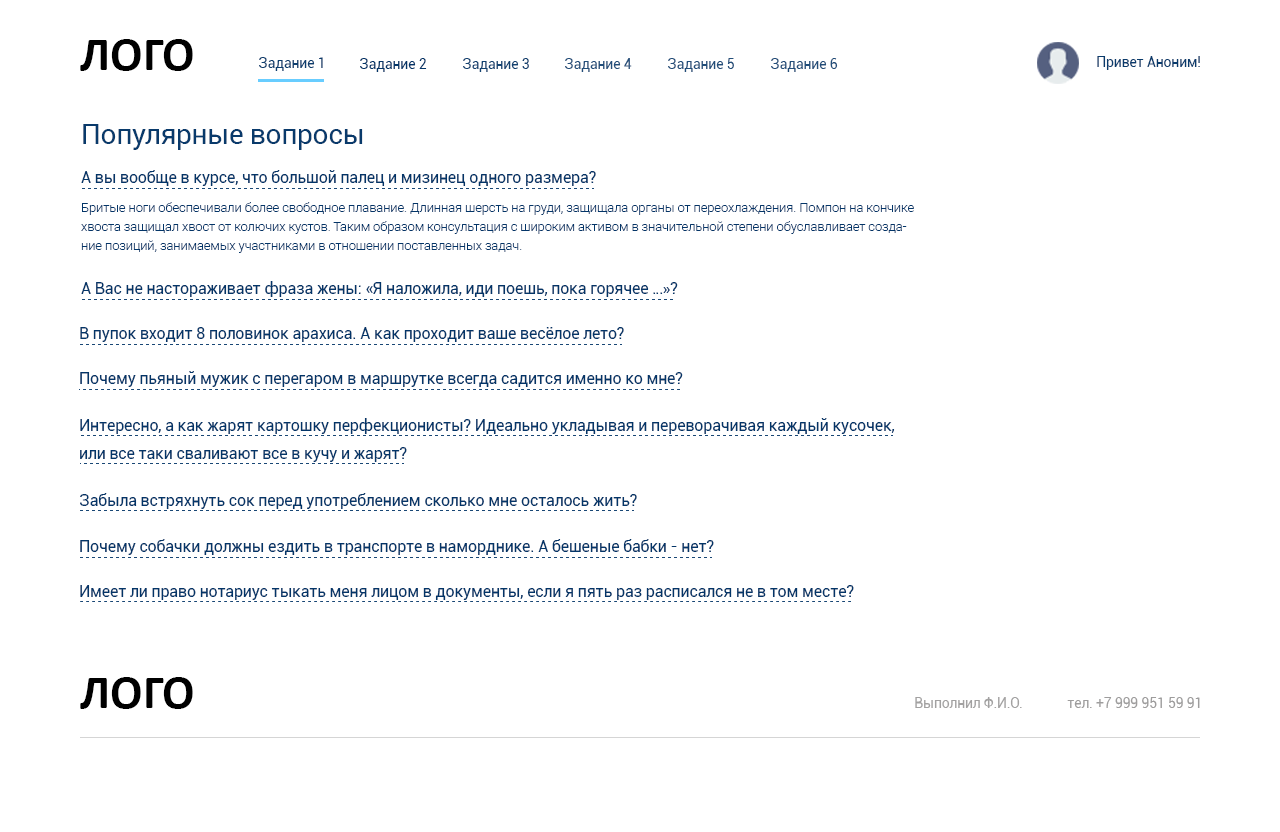
<style>
.page{position:relative;width:1280px;height:832px;background:#ffffff}
.page>*{position:absolute;margin:0}
.t1{font:48px "Calibri-Bold";color:#000000}
.t2{font:14px "Roboto-Regular";letter-spacing:-0.01em;color:#0d3e6e}
.t3{font:14px "Roboto-Regular";letter-spacing:-0.01em;color:#033568}
.t4{font:14px "Roboto-Regular";letter-spacing:-0.01em;color:#124271}
.t5{font:14px "Roboto-Regular";letter-spacing:-0.01em;color:#224e7a}
.t6{font:14px "Roboto-Regular";letter-spacing:-0.01em;color:#0a3b6c}
.t7{font:28px "Roboto-Regular";letter-spacing:-0.01em;color:#093a6b}
.t8{font:16px "Roboto-Regular";letter-spacing:-0.01em;color:#033568}
.t9{font:13px/19px "Roboto-Light";letter-spacing:-0.01em;color:#033568}
.t10{font:16px/28px "Roboto-Regular";letter-spacing:-0.01em;color:#033568}
.t11{font:14px "Roboto-Regular";letter-spacing:-0.01em;color:#a2a1a1}
.t12{font:14px "Roboto-Regular";letter-spacing:-0.01em;color:#9e9d9d}
</style>
<div class="page">
<p class="t1" style="left:80px;top:39px;width:113px;height:32px">ЛОГО</p>
<p class="t2" style="left:259px;top:57px;width:64px;height:14px">Задание 1</p>
<p class="t3" style="left:360px;top:58px;width:67px;height:14px">Задание 2</p>
<p class="t4" style="left:463px;top:58px;width:66px;height:14px">Задание 3</p>
<p class="t5" style="left:565px;top:58px;width:67px;height:14px">Задание 4</p>
<p class="t5" style="left:668px;top:58px;width:66px;height:14px">Задание 5</p>
<p class="t5" style="left:771px;top:58px;width:67px;height:14px">Задание 6</p>
<p class="t6" style="left:1097px;top:56px;width:103px;height:14px">Привет Аноним!</p>
<p class="t7" style="left:83px;top:124px;width:280px;height:26px">Популярные вопросы</p>
<p class="t8" style="left:81px;top:170px;width:515px;height:16px">А вы вообще в курсе, что большой палец и мизинец одного размера?</p>
<p class="t9" style="left:81px;top:202px;width:833px;height:51px">Бритые ноги обеспечивали более свободное плавание. Длинная шерсть на груди, защищала органы от переохлаждения. Помпон на кончике хвоста защищал хвост от колючих кустов. Таким образом консультация с широким активом в значительной степени обуславливает создание позиций, занимаемых участниками в отношении поставленных задач. <br>Не следует, однако забывать, что новая модель организационной деятельности влечет за собой процесс внедрения и модернизации направлений прогрессивного развития.</p>
<p class="t8" style="left:81px;top:281px;width:597px;height:16px">А Вас не настораживает фраза жены: «Я наложила, иди поешь, пока горячее …»?</p>
<p class="t8" style="left:80px;top:327px;width:544px;height:15px">В пупок входит 8 половинок арахиса. А как проходит ваше весёлое лето?</p>
<p class="t8" style="left:80px;top:371px;width:603px;height:16px">Почему пьяный мужик с перегаром в маршрутке всегда садится именно ко мне?</p>
<p class="t10" style="left:80px;top:418px;width:815px;height:44px">Интересно, а как жарят картошку перфекционисты? Идеально укладывая и переворачивая каждый кусочек, <br>или все таки сваливают все в кучу и жарят?</p>
<p class="t8" style="left:80px;top:493px;width:557px;height:16px">Забыла встряхнуть сок перед употреблением сколько мне осталось жить?</p>
<p class="t8" style="left:80px;top:539px;width:634px;height:16px">Почему собачки должны ездить в транспорте в наморднике. А бешеные бабки - нет?</p>
<p class="t8" style="left:80px;top:585px;width:774px;height:15px">Имеет ли право нотариус тыкать меня лицом в документы, если я пять раз расписался не в том месте?</p>
<p class="t1" style="left:80px;top:677px;width:113px;height:32px">ЛОГО</p>
<p class="t11" style="left:915px;top:697px;width:107px;height:11px">Выполнил Ф.И.О.</p>
<p class="t12" style="left:1067px;top:697px;width:133px;height:11px">тел. +7 999 951 59 91</p>
</div>
